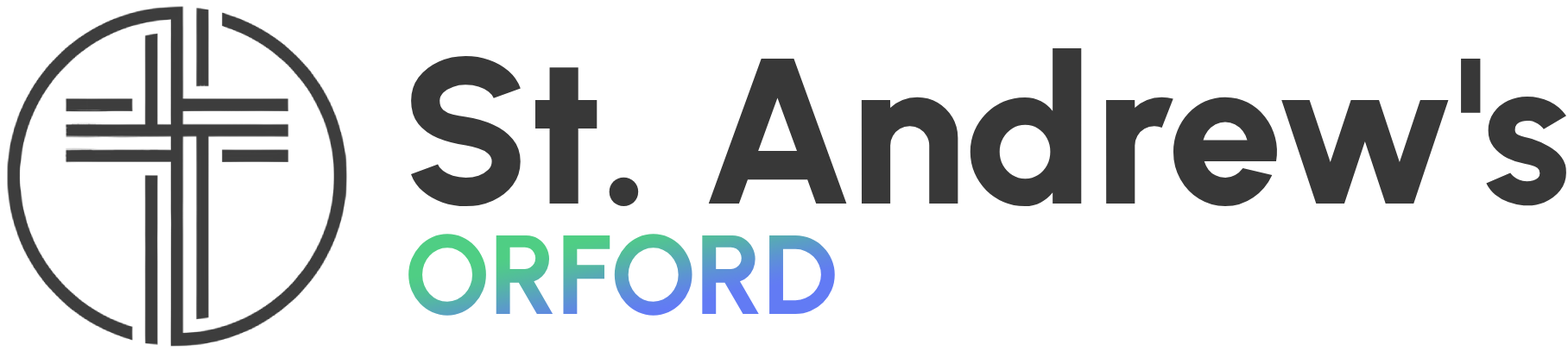
<style>
.page{position:relative;width:1568px;height:351px;background:#ffffff}
.page>*{position:absolute;margin:0}
.t1{font:207.2px "Urbanist-ExtraBold";color:#383838}
.t2{font:112.2px "Urbanist-Bold"}
</style>
<div class="page">
<p class="t1" style="left:410px;top:48px;width:1157px;height:159px">St. Andrew's</p>
<p class="t2" style="left:408px;top:234px;width:427px;height:82px">ORFORD</p>
</div>
